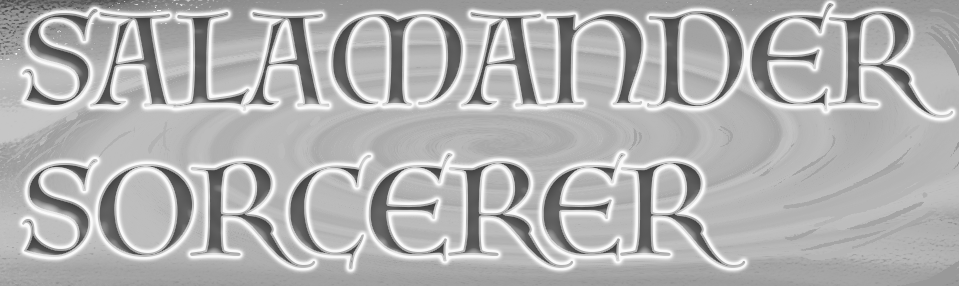
<style>
.page{position:relative;width:959px;height:286px}
.page>*{position:absolute;margin:0}
.t1{font:125px "Luminari-Regular"}
</style>
<div class="page">
<p class="t1" style="left:22px;top:3px;width:932px;height:267px">SALAMANDER<br>SORCERER</p>
</div>
